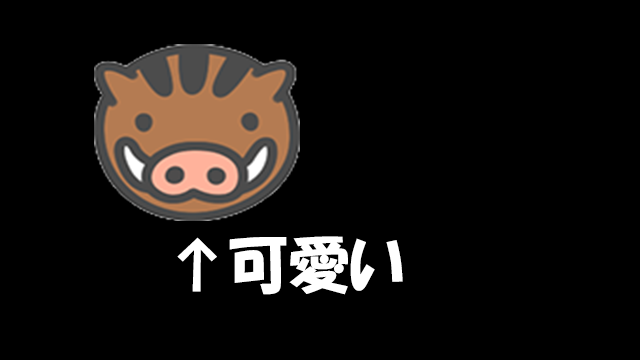
<style>
.page{position:relative;width:640px;height:360px;background:#000000}
.page>*{position:absolute;margin:0}
.t1{font:60.7px "HGPSoeiKakupoptai";color:#ffffff}
</style>
<div class="page">
<p class="t1" style="left:177px;top:236px;width:226px;height:59px">↑可愛い</p>
</div>
